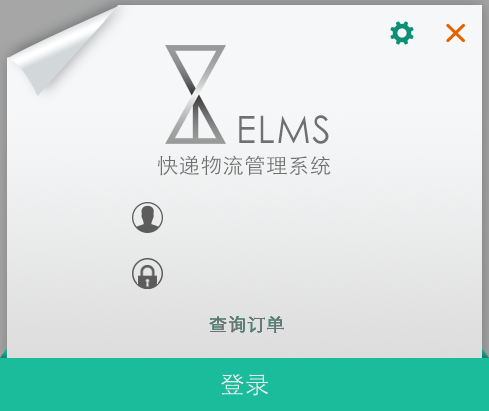
<style>
.page{position:relative;width:489px;height:411px}
.page>*{position:absolute;margin:0}
.t1{font:21.1px/42.1px "STXihei";letter-spacing:0.035em;color:#707070}
.t2{font:37.6px/42.1px "STXihei";letter-spacing:0.035em;color:#707070}
.t3{font:18px "STXihei";letter-spacing:0.035em;color:#707070;font-weight:bold}
</style>
<div class="page">
<p class="t1" style="left:157px;top:115px;width:174px;height:61px;text-align:right"><span class="t2">ELMS<br></span>快递物流管理系统</p>
<p class="t3" style="left:209px;top:316px;width:75px;height:17px">查询订单</p>
<p class="t3" style="left:209px;top:316px;width:75px;height:17px">查询订单</p>
<p class="t3" style="left:209px;top:316px;width:75px;height:17px">查询订单</p>
</div>
